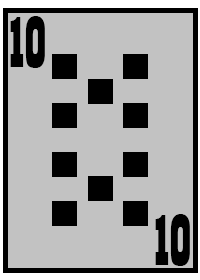
<style>
.page{position:relative;width:200px;height:280px;background:#c2c2c2}
.page>*{position:absolute;margin:0}
.t1{font:75px "Playbill";letter-spacing:-0.1em;color:#000000}
</style>
<div class="page">
<p class="t1" style="left:10px;top:16px;width:35px;height:52px">10</p>
<p class="t1" style="left:155px;top:214px;width:35px;height:52px">10</p>
</div>
